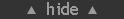
<style>
.page{position:relative;width:124px;height:19px;background:#333333}
.page>*{position:absolute;margin:0}
.t1{font:16.5px "TrebuchetMS";color:#9a9a9a}
</style>
<div class="page">
<p class="t1" style="left:47px;top:2px;width:31px;height:13px">hide</p>
</div>
